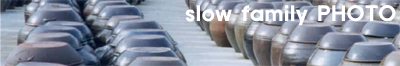
<style>
.page{position:relative;width:400px;height:66px}
.page>*{position:absolute;margin:0}
.t1{font:20px "ExpoB-HM";letter-spacing:0.025em;color:#ffffff}
</style>
<div class="page">
<p class="t1" style="left:185px;top:5px;width:211px;height:21px">slow family PHOTO</p>
</div>
